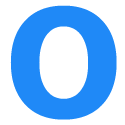
<style>
.page{position:relative;width:125px;height:125px;background:#ffffff}
.page>*{position:absolute;margin:0}
.t1{font:150px "Tahoma-Bold";color:#1f8af8}
</style>
<div class="page">
<p class="t1" style="left:10px;top:5px;width:107px;height:115px">O</p>
</div>
